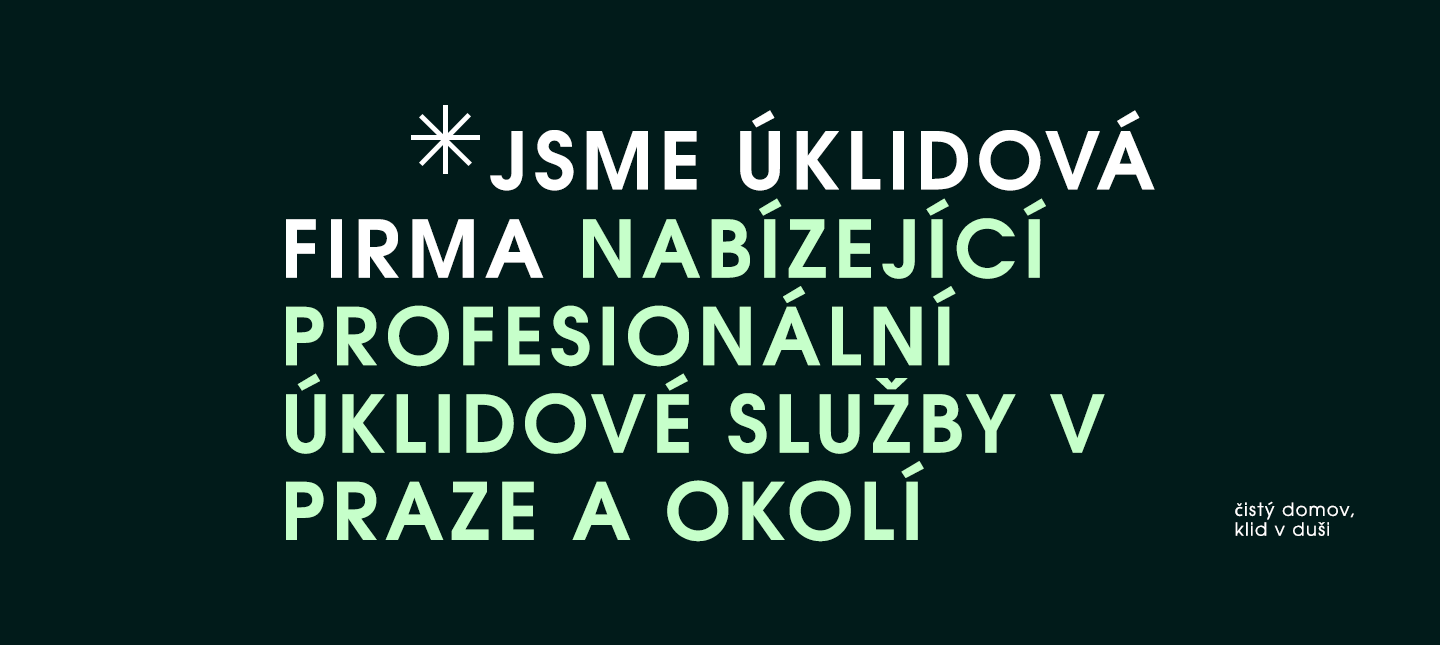
<style>
.page{position:relative;width:1440px;height:645px;background:#011b1a}
.page>*{position:absolute;margin:0}
.t1{font:78.8px "Evolventa-Bold";letter-spacing:0.075em;color:#ffffff}
.t2{font:78.8px/87.5px "Evolventa-Bold";letter-spacing:0.075em;color:#c6ffca}
.t3{font:78.8px/87.5px "Evolventa-Bold";letter-spacing:0.075em;color:#ffffff}
.t4{font:17.9px/19.9px "Evolventa-Regular";letter-spacing:0.075em;color:#ffffff}
.t5{font:17.9px/19.9px "MyriadPro-Regular";letter-spacing:0.075em;color:#ffffff}
</style>
<div class="page">
<p class="t1" style="left:490px;top:110px;width:665px;height:81px">JSME ÚKLIDOVÁ</p>
<p class="t2" style="left:286px;top:198px;width:819px;height:344px"><span class="t3">FIRMA </span>NABÍZEJÍCÍ<br>PROFESIONÁLNÍ <br>ÚKLIDOVÉ SLUŽBY V <br>PRAZE A OKOLÍ</p>
<p class="t4" style="left:1235px;top:501px;width:119px;height:35px"><span class="t5">č</span>istý domov, <br>klid v duši</p>
</div>
